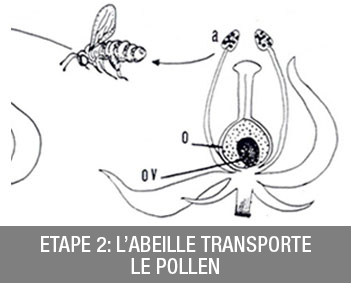
<style>
.page{position:relative;width:351px;height:283px;background:#ffffff}
.page>*{position:absolute;margin:0}
.t1{font:21.6px/21.6px "HelveticaNeue-MediumCond";color:#ffffff}
</style>
<div class="page">
<p class="t1" style="left:41px;top:236px;width:270px;height:38px;text-align:center">ETAPE 2: L’ABEILLE TRANSPORTE<br>LE POLLEN</p>
</div>
